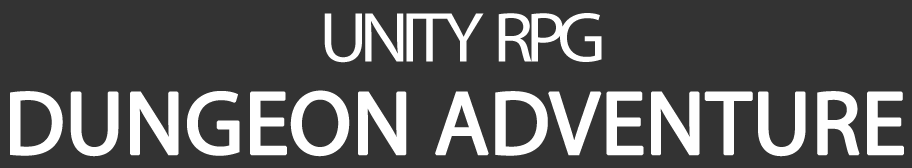
<style>
.page{position:relative;width:912px;height:168px;background:#333333}
.page>*{position:absolute;margin:0}
.t1{font:71.2px "MyriadPro-Regular";letter-spacing:-0.1em;color:#ffffff;text-transform:uppercase;scale:1.05 1}
.t2{font:90.3px "MyriadPro-Regular";letter-spacing:-0.01em;color:#ffffff;text-transform:uppercase;font-weight:bold}
</style>
<div class="page">
<p class="t1" style="left:324px;top:13px;width:278px;height:50px">Unity  RPG</p>
<p class="t2" style="left:10px;top:90px;width:894px;height:67px">DUNGEON ADVENTURE</p>
</div>
